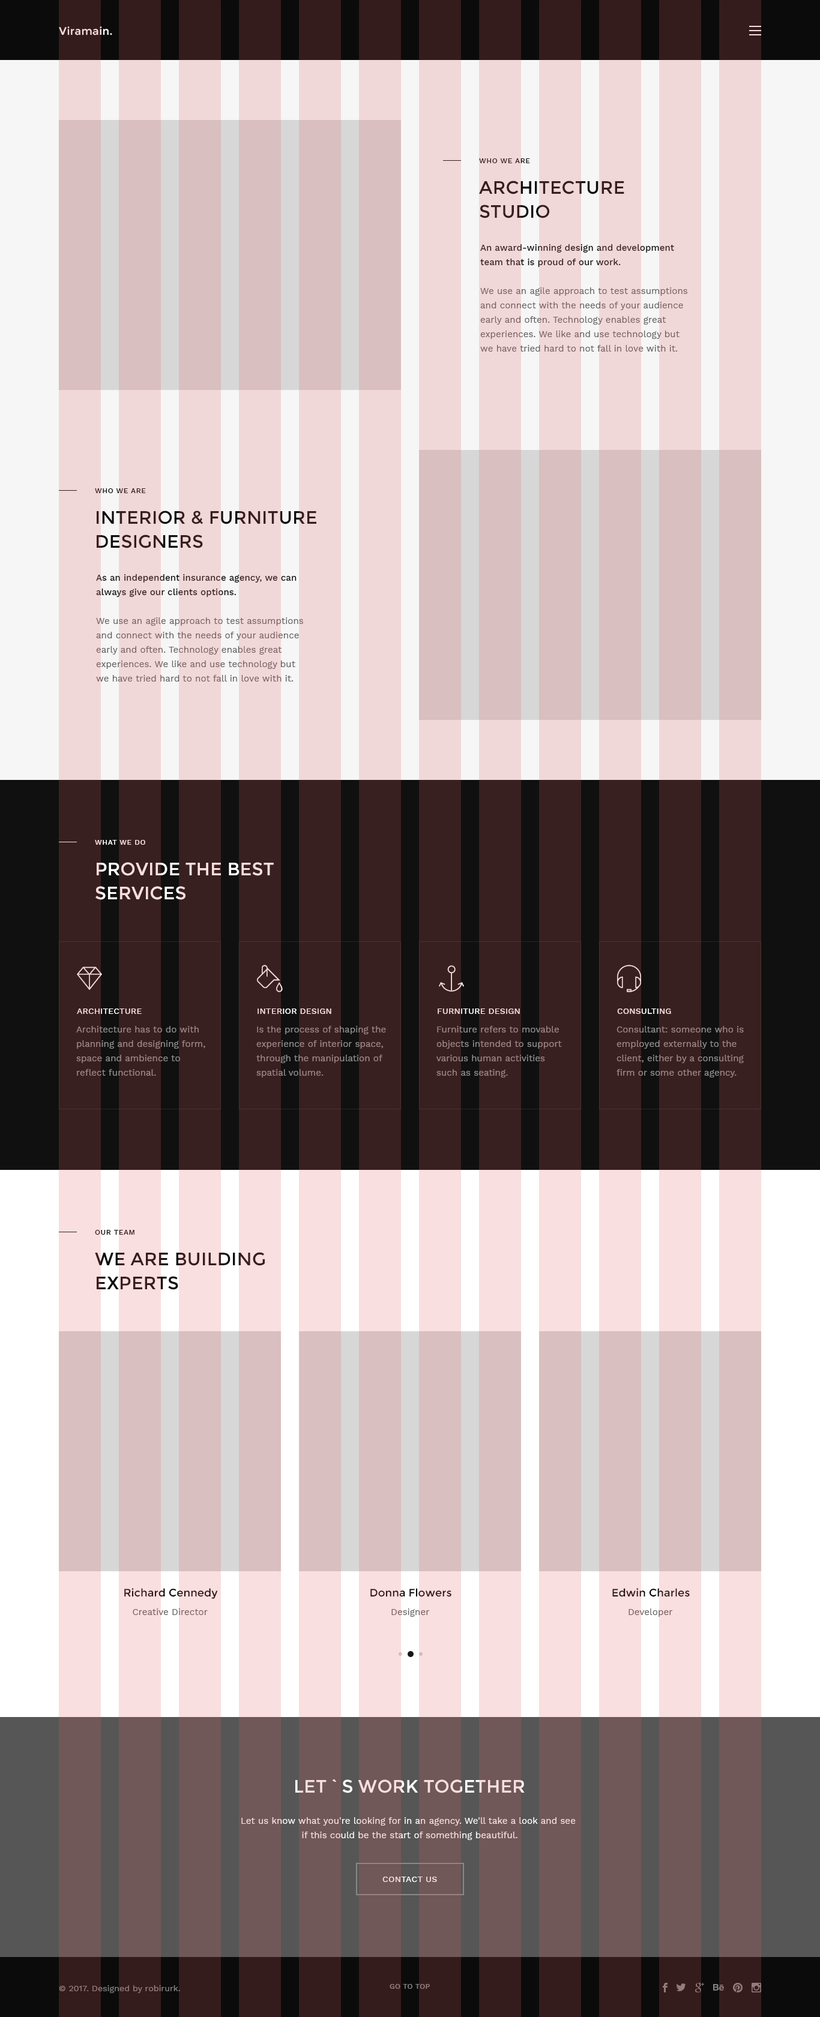
<style>
.page{position:relative;width:820px;height:2017px}
.page>*{position:absolute;margin:0}
.t1{font:10.8px "Montserrat-Regular";letter-spacing:0.025em;color:#f9dfdf}
.t2{font:7.2px "WorkSans-Medium";letter-spacing:0.05em;color:#371d1d;text-transform:uppercase}
.t3{font:18px/24px "Montserrat-Regular";letter-spacing:0.005em;color:#371d1d;text-transform:uppercase}
.t4{font:9px/14.4px "WorkSans-Regular";letter-spacing:0.005em}
.t5{font:9px/14.4px "WorkSans-Medium";letter-spacing:0.005em}
.t6{font:18px/24px "Montserrat-Regular";letter-spacing:0.005em;text-transform:uppercase}
.t7{font:7.2px "WorkSans-Medium";letter-spacing:0.05em;text-transform:uppercase}
.t8{font:8.4px "WorkSans-Medium";letter-spacing:0.01em;color:#f9dfdf;text-transform:uppercase}
.t9{font:8.4px "WorkSans-Medium";letter-spacing:0.01em;text-transform:uppercase}
.t10{font:9px/14.4px "WorkSans-Regular";letter-spacing:0.005em;color:#8e8e8e}
.t11{font:10.8px "Montserrat-Regular";letter-spacing:0.005em;color:#2d1313}
.t12{font:9px "WorkSans-Regular";letter-spacing:0.005em;color:#795f5f}
.t13{font:9px "WorkSans-Regular";letter-spacing:0.005em}
.t14{font:18px "Montserrat-Regular";letter-spacing:0.005em;color:#f9dfdf;text-transform:uppercase}
.t15{font:9px/14.4px "WorkSans-Regular";letter-spacing:0.005em;color:#f9dfdf}
.t16{font:8.4px "WorkSans-Medium";letter-spacing:0.025em;text-transform:uppercase}
.t17{font:8.4px "WorkSans-Regular";letter-spacing:0.005em;color:#838383}
.t18{font:7.2px "WorkSans-Medium";letter-spacing:0.025em;color:#838383;text-transform:uppercase}
</style>
<div class="page">
<p class="t1" style="left:59px;top:26px;width:53px;height:9px">Viramain.</p>
<p class="t2" style="left:479px;top:158px;width:51px;height:5px">who we are</p>
<p class="t3" style="left:479px;top:181px;width:145px;height:37px">architecture<br>studio</p>
<p class="t4" style="left:480px;top:244px;width:207px;height:108px"><span class="t5">An award-winning design and development <br>team that is proud of our work.<br><br></span>We use an agile approach to test assumptions <br>and connect with the needs of your audience <br>early and often. Technology enables great <br>experiences. We like and use technology but <br>we have tried hard to not fall in love with it.</p>
<p class="t2" style="left:95px;top:488px;width:51px;height:5px">who we are</p>
<p class="t6" style="left:97px;top:511px;width:219px;height:37px">interior &amp; furniture<br>designers</p>
<p class="t4" style="left:96px;top:574px;width:207px;height:108px"><span class="t5">As an independent insurance agency, we can <br>always give our clients options.<br><br></span>We use an agile approach to test assumptions <br>and connect with the needs of your audience <br>early and often. Technology enables great <br>experiences. We like and use technology but <br>we have tried hard to not fall in love with it.</p>
<p class="t7" style="left:95px;top:840px;width:50px;height:5px">what we do</p>
<p class="t6" style="left:95px;top:862px;width:179px;height:38px">Provide the best<br>services</p>
<p class="t8" style="left:77px;top:1009px;width:65px;height:5px">architecture</p>
<p class="t8" style="left:257px;top:1009px;width:74px;height:5px">interior design</p>
<p class="t8" style="left:437px;top:1009px;width:83px;height:5px">furniture design</p>
<p class="t9" style="left:617px;top:1009px;width:54px;height:5px">consulting</p>
<p class="t10" style="left:76px;top:1026px;width:129px;height:50px">Architecture has to do with <br>planning and designing form, <br>space and ambience to <br>reflect functional.</p>
<p class="t10" style="left:256px;top:1026px;width:130px;height:52px">Is the process of shaping the <br>experience of interior space, <br>through the manipulation of <br>spatial volume.</p>
<p class="t10" style="left:436px;top:1026px;width:126px;height:52px">Furniture refers to movable <br>objects intended to support <br>various human activities <br>such as seating.</p>
<p class="t10" style="left:616px;top:1026px;width:127px;height:52px">Consultant: someone who is <br>employed externally to the <br>client, either by a consulting <br>firm or some other agency.</p>
<p class="t7" style="left:95px;top:1230px;width:39px;height:5px">our team</p>
<p class="t6" style="left:95px;top:1252px;width:170px;height:38px">We are building<br>experts</p>
<p class="t11" style="left:124px;top:1588px;width:94px;height:11px">Richard Cennedy</p>
<p class="t11" style="left:370px;top:1588px;width:81px;height:9px">Donna Flowers</p>
<p class="t11" style="left:612px;top:1588px;width:77px;height:9px">Edwin Charles</p>
<p class="t12" style="left:133px;top:1609px;width:75px;height:6px">Creative Director</p>
<p class="t13" style="left:391px;top:1609px;width:39px;height:8px">Designer</p>
<p class="t13" style="left:628px;top:1609px;width:45px;height:8px">Developer</p>
<p class="t14" style="left:295px;top:1779px;width:229px;height:14px">Let`s work together</p>
<p class="t15" style="left:241px;top:1817px;width:334px;height:23px;text-align:center">Let us know what you're looking for in an agency. We'll take a look and see <br>if this could be the start of something beautiful.</p>
<p class="t16" style="left:382px;top:1877px;width:55px;height:5px">contact us</p>
<p class="t17" style="left:59px;top:1985px;width:121px;height:8px">© 2017. Designed by robirurk.</p>
<p class="t18" style="left:389px;top:1984px;width:41px;height:5px">go to top</p>
</div>
